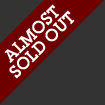
<style>
.page{position:relative;width:105px;height:105px;background:#333333}
.page>*{position:absolute;margin:0}
.t1{font:18px/15px "LubalinGraphITC-Demi";color:#ffffff}
</style>
<div class="page">
<p class="t1" style="left:4px;top:4px;width:71px;height:75px;text-align:center;rotate:-45deg">ALMOST<br>SOLD OUT</p>
</div>
